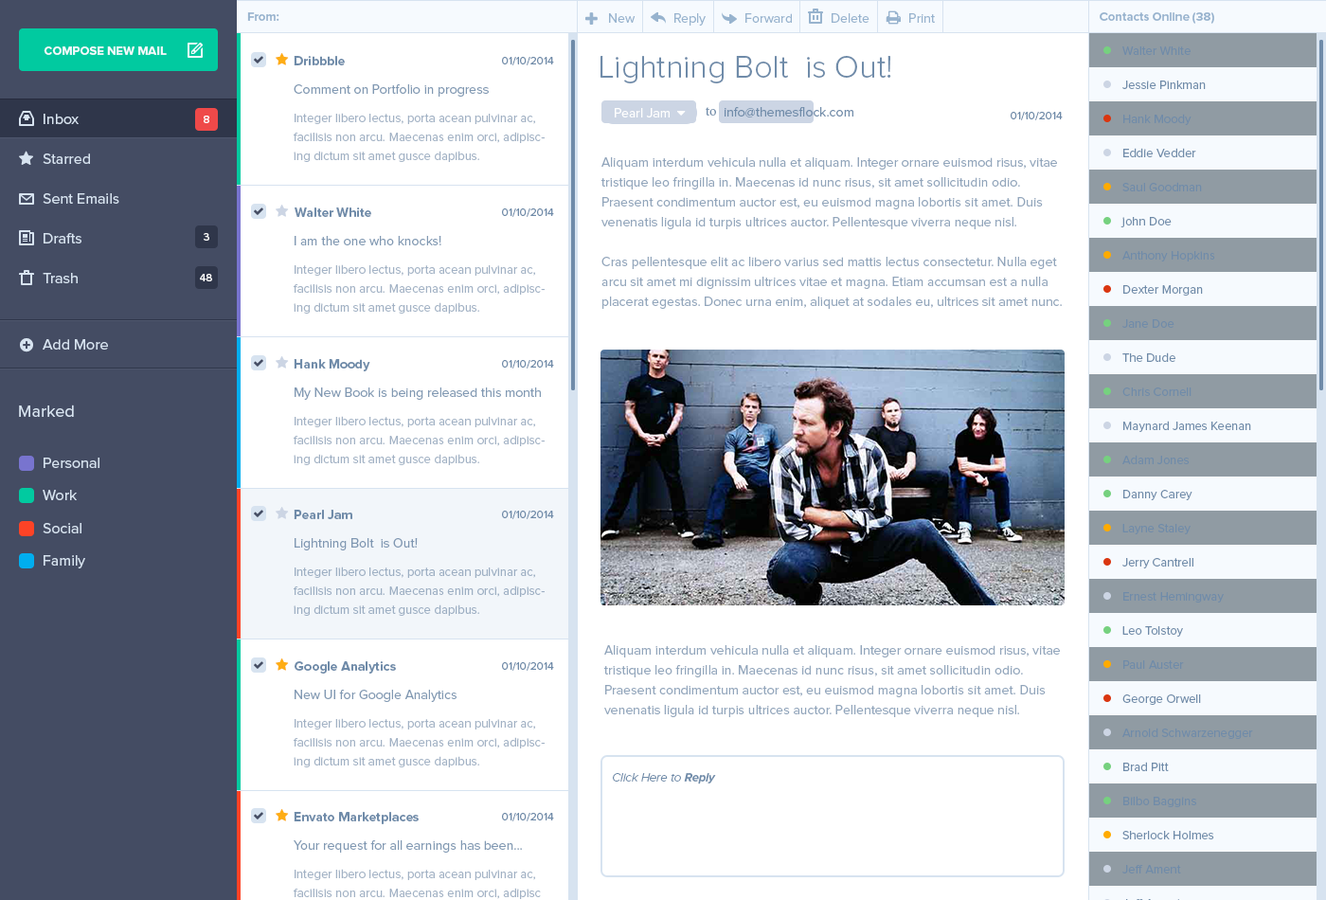
<style>
.page{position:relative;width:1326px;height:900px;background:#ffffff}
.page>*{position:absolute;margin:0}
.t1{font:12.3px "ProximaNova-Bold";color:#97b3ce}
.t2{font:13.3px "ProximaNova-Regular";color:#97b3ce}
.t3{font:12.3px "ProximaNova-Bold";color:#f6fafe;text-transform:uppercase}
.t4{font:12.3px "ProximaNova-Regular";color:#6f8ba9}
.t5{font:13.3px "ProximaNova-Bold";color:#6f8ba9}
.t6{font:11.4px "ProximaNova-Regular";color:#6f8ba9}
.t7{font:32.2px "ProximaNova-Light";color:#6f8ba9}
.t8{font:13.3px "ProximaNova-Regular";color:#6f8ba9}
.t9{font:15.1px "ProximaNova-Regular";color:#d7e3f0}
.t10{font:12.3px/18.9px "ProximaNova-Regular";color:#a2b2c5}
.t11{font:13.3px "ProximaNova-Regular";color:#ffffff}
.t12{font:13.3px "MinionPro-Regular";color:#6f8ba9}
.t13{font:11.4px "ProximaNova-Regular";color:#ffffff}
.t14{font:13.3px/19.9px "ProximaNova-Regular";color:#92a6bc}
.t15{font:17px "ProximaNova-Regular";color:#d7e3f0}
.t16{font:12.3px/18.9px "ProximaNova-Regular";color:#9dafc3}
.t17{font:12.3px "ProximaNova-LightIt";color:#6f8ba9}
.t18{font:12.3px "ProximaNova-BoldIt";color:#6f8ba9}
</style>
<div class="page">
<p class="t1" style="left:247px;top:12px;width:32px;height:9px">From:</p>
<p class="t2" style="left:609px;top:13px;width:26px;height:10px">New</p>
<p class="t2" style="left:674px;top:13px;width:31px;height:13px">Reply</p>
<p class="t2" style="left:745px;top:13px;width:47px;height:10px">Forward</p>
<p class="t2" style="left:831px;top:13px;width:38px;height:10px">Delete</p>
<p class="t2" style="left:909px;top:13px;width:26px;height:10px">Print</p>
<p class="t1" style="left:1099px;top:12px;width:115px;height:12px">Contacts Online (38)</p>
<p class="t3" style="left:44px;top:46px;width:123px;height:9px">Compose New Mail</p>
<p class="t4" style="left:1122px;top:46px;width:68px;height:9px">Walter White</p>
<p class="t5" style="left:294px;top:56px;width:51px;height:9px">Dribbble</p>
<p class="t6" style="left:502px;top:57px;width:52px;height:8px">01/10/2014</p>
<p class="t7" style="left:600px;top:56px;width:291px;height:27px">Lightning Bolt  is Out!</p>
<p class="t8" style="left:294px;top:84px;width:195px;height:13px">Comment on Portfolio in progress</p>
<p class="t4" style="left:1122px;top:80px;width:83px;height:9px">Jessie Pinkman</p>
<p class="t9" style="left:44px;top:114px;width:35px;height:10px">Inbox</p>
<p class="t10" style="left:294px;top:113px;width:250px;height:49px">Integer libero lectus, porta acean pulvinar ac, facilisis non arcu. Maecenas enim orci, adipiscing dictum sit amet gusce dapibus.</p>
<p class="t11" style="left:615px;top:108px;width:54px;height:9px">Pearl Jam</p>
<p class="t12" style="left:705px;top:107px;width:11px;height:9px">to</p>
<p class="t8" style="left:724px;top:107px;width:129px;height:10px">info@themesflock.com</p>
<p class="t6" style="left:1010px;top:112px;width:52px;height:8px">01/10/2014</p>
<p class="t4" style="left:1123px;top:114px;width:68px;height:11px">Hank Moody</p>
<p class="t13" style="left:204px;top:116px;width:5px;height:7px">8</p>
<p class="t4" style="left:1123px;top:148px;width:73px;height:9px">Eddie Vedder</p>
<p class="t9" style="left:43px;top:153px;width:47px;height:11px">Starred</p>
<p class="t14" style="left:600px;top:157px;width:461px;height:152px">Aliquam interdum vehicula nulla et aliquam. Integer ornare euismod risus, vitae tristique leo fringilla in. Maecenas id nunc risus, sit amet sollicitudin odio. <br>Praesent condimentum auctor est, eu euismod magna lobortis sit amet. Duis venenatis ligula id turpis ultrices auctor. Pellentesque viverra neque nisl. <br><br>Cras pellentesque elit ac libero varius sed mattis lectus consectetur. Nulla eget arcu sit amet mi dignissim ultrices vitae et magna. Etiam accumsan est a nulla placerat egestas. Donec urna enim, aliquet at sodales eu, ultrices sit amet nunc.</p>
<p class="t4" style="left:1122px;top:182px;width:80px;height:9px">Saul Goodman</p>
<p class="t9" style="left:43px;top:193px;width:76px;height:11px">Sent Emails</p>
<p class="t5" style="left:294px;top:207px;width:77px;height:10px">Walter White</p>
<p class="t6" style="left:502px;top:208px;width:52px;height:9px">01/10/2014</p>
<p class="t4" style="left:1120px;top:217px;width:51px;height:10px">john Doe</p>
<p class="t9" style="left:44px;top:233px;width:37px;height:10px">Drafts</p>
<p class="t13" style="left:204px;top:233px;width:5px;height:8px">3</p>
<p class="t8" style="left:294px;top:236px;width:147px;height:9px">I am the one who knocks!</p>
<p class="t4" style="left:1122px;top:251px;width:93px;height:10px">Anthony Hopkins</p>
<p class="t10" style="left:294px;top:264px;width:250px;height:49px">Integer libero lectus, porta acean pulvinar ac, facilisis non arcu. Maecenas enim orci, adipiscing dictum sit amet gusce dapibus.</p>
<p class="t9" style="left:43px;top:273px;width:35px;height:10px">Trash</p>
<p class="t13" style="left:200px;top:274px;width:12px;height:7px">48</p>
<p class="t4" style="left:1123px;top:285px;width:80px;height:10px">Dexter Morgan</p>
<p class="t4" style="left:1122px;top:319px;width:52px;height:9px">Jane Doe</p>
<p class="t9" style="left:43px;top:339px;width:65px;height:10px">Add More</p>
<p class="t4" style="left:1122px;top:352px;width:53px;height:10px">The Dude</p>
<p class="t5" style="left:294px;top:359px;width:76px;height:12px">Hank Moody</p>
<p class="t6" style="left:502px;top:360px;width:52px;height:8px">01/10/2014</p>
<p class="t8" style="left:294px;top:387px;width:247px;height:13px">My New Book is being released this month</p>
<p class="t4" style="left:1122px;top:387px;width:69px;height:9px">Chris Cornell</p>
<p class="t15" style="left:19px;top:404px;width:55px;height:13px">Marked</p>
<p class="t10" style="left:294px;top:416px;width:250px;height:49px">Integer libero lectus, porta acean pulvinar ac, facilisis non arcu. Maecenas enim orci, adipiscing dictum sit amet gusce dapibus.</p>
<p class="t4" style="left:1123px;top:420px;width:128px;height:12px">Maynard James Keenan</p>
<p class="t9" style="left:44px;top:457px;width:55px;height:11px">Personal</p>
<p class="t4" style="left:1122px;top:454px;width:67px;height:10px">Adam Jones</p>
<p class="t9" style="left:43px;top:490px;width:34px;height:10px">Work</p>
<p class="t4" style="left:1123px;top:490px;width:69px;height:10px">Danny Carey</p>
<p class="t5" style="left:294px;top:509px;width:58px;height:10px">Pearl Jam</p>
<p class="t6" style="left:502px;top:510px;width:52px;height:9px">01/10/2014</p>
<p class="t9" style="left:43px;top:523px;width:38px;height:10px">Social</p>
<p class="t4" style="left:1122px;top:524px;width:68px;height:10px">Layne Staley</p>
<p class="t8" style="left:294px;top:538px;width:124px;height:12px">Lightning Bolt  is Out!</p>
<p class="t9" style="left:44px;top:555px;width:41px;height:13px">Family</p>
<p class="t4" style="left:1122px;top:558px;width:71px;height:10px">Jerry Cantrell</p>
<p class="t16" style="left:294px;top:566px;width:250px;height:49px">Integer libero lectus, porta acean pulvinar ac, facilisis non arcu. Maecenas enim orci, adipiscing dictum sit amet gusce dapibus.</p>
<p class="t4" style="left:1123px;top:592px;width:100px;height:10px">Ernest Hemingway</p>
<p class="t4" style="left:1122px;top:626px;width:61px;height:10px">Leo Tolstoy</p>
<p class="t14" style="left:603px;top:645px;width:457px;height:72px">Aliquam interdum vehicula nulla et aliquam. Integer ornare euismod risus, vitae tristique leo fringilla in. Maecenas id nunc risus, sit amet sollicitudin odio. <br>Praesent condimentum auctor est, eu euismod magna lobortis sit amet. Duis venenatis ligula id turpis ultrices auctor. Pellentesque viverra neque nisl.</p>
<p class="t5" style="left:294px;top:661px;width:102px;height:12px">Google Analytics</p>
<p class="t6" style="left:502px;top:662px;width:52px;height:8px">01/10/2014</p>
<p class="t4" style="left:1123px;top:660px;width:61px;height:8px">Paul Auster</p>
<p class="t8" style="left:294px;top:689px;width:162px;height:13px">New UI for Google Analytics</p>
<p class="t4" style="left:1122px;top:694px;width:79px;height:10px">George Orwell</p>
<p class="t10" style="left:294px;top:718px;width:250px;height:49px">Integer libero lectus, porta acean pulvinar ac, facilisis non arcu. Maecenas enim orci, adipiscing dictum sit amet gusce dapibus.</p>
<p class="t4" style="left:1122px;top:727px;width:131px;height:12px">Arnold Schwarzenegger</p>
<p class="t4" style="left:1123px;top:761px;width:45px;height:10px">Brad Pitt</p>
<p class="t17" style="left:613px;top:773px;width:103px;height:11px">Click Here to <span class="t18">Reply</span></p>
<p class="t4" style="left:1123px;top:795px;width:73px;height:12px">Bilbo Baggins</p>
<p class="t5" style="left:294px;top:811px;width:125px;height:13px">Envato Marketplaces</p>
<p class="t6" style="left:502px;top:812px;width:52px;height:9px">01/10/2014</p>
<p class="t4" style="left:1122px;top:830px;width:92px;height:9px">Sherlock Holmes</p>
<p class="t8" style="left:294px;top:840px;width:228px;height:12px">Your request for all earnings has been...</p>
<p class="t10" style="left:294px;top:868px;width:247px;height:31px">Integer libero lectus, porta acean pulvinar ac, facilisis non arcu. Maecenas enim orci, adipisc</p>
<p class="t4" style="left:1122px;top:864px;width:59px;height:9px">Jeff Ament</p>
<p class="t4" style="left:1126px;top:899px;width:53px;height:1px">Jeff Ament</p>
</div>
